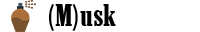
<style>
.page{position:relative;width:200px;height:32px;background:#ffffff}
.page>*{position:absolute;margin:0}
.t1{font:32px "Marlboro";color:#000000}
</style>
<div class="page">
<p class="t1" style="left:48px;top:4px;width:68px;height:27px">(M)usk</p>
</div>
